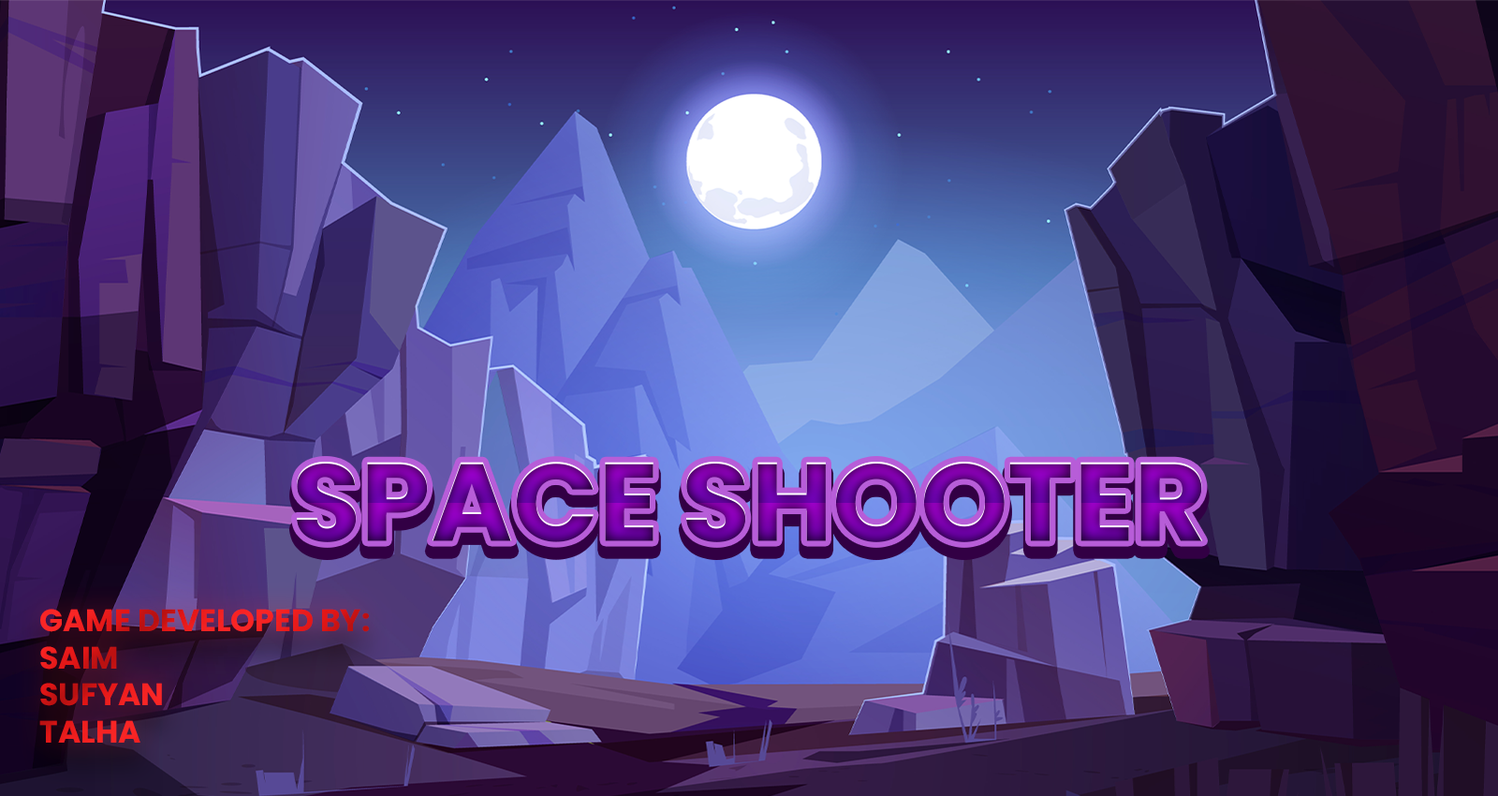
<style>
.page{position:relative;width:1498px;height:796px}
.page>*{position:absolute;margin:0}
.t1{font:111.7px "Poppins-Bold";text-transform:uppercase}
.t2{font:30.9px "Poppins-Bold";color:#e81c1c;text-transform:uppercase}
</style>
<div class="page">
<p class="t1" style="left:297px;top:462px;width:906px;height:80px">SPACE SHOOTER</p>
<p class="t2" style="left:39px;top:609px;width:330px;height:134px">Game developed by:<br>SAim<br>Sufyan<br>Talha</p>
</div>
